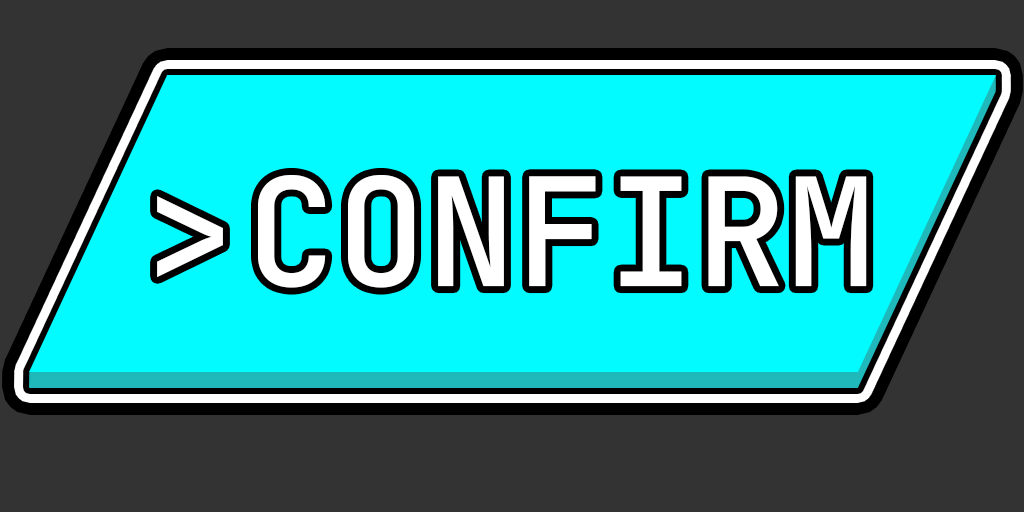
<style>
.page{position:relative;width:1024px;height:512px;background:#333333}
.page>*{position:absolute;margin:0}
.t1{font:150px "JetBrainsMonoRoman-Medium";color:#ffffff}
</style>
<div class="page">
<p class="t1" style="left:157px;top:175px;width:710px;height:113px">CONFIRM</p>
</div>
